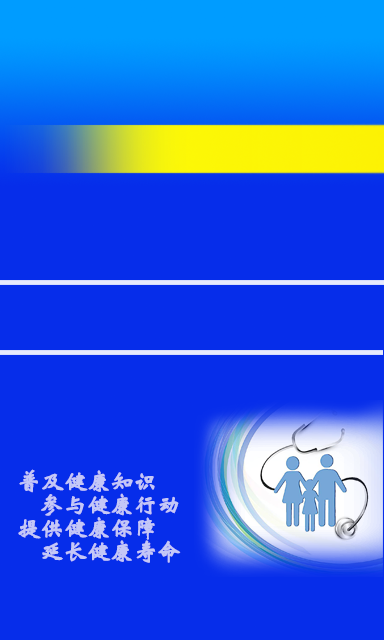
<style>
.page{position:relative;width:384px;height:640px;background:#062dea}
.page>*{position:absolute;margin:0}
.t1{font:23.3px "STXinwei";letter-spacing:-0.025em;color:#c4c7f7;font-weight:bold}
</style>
<div class="page">
<p class="t1" style="left:18px;top:469px;width:163px;height:94px">普及健康知识<br>    参与健康行动<br>提供健康保障<br>    延长健康寿命</p>
</div>
